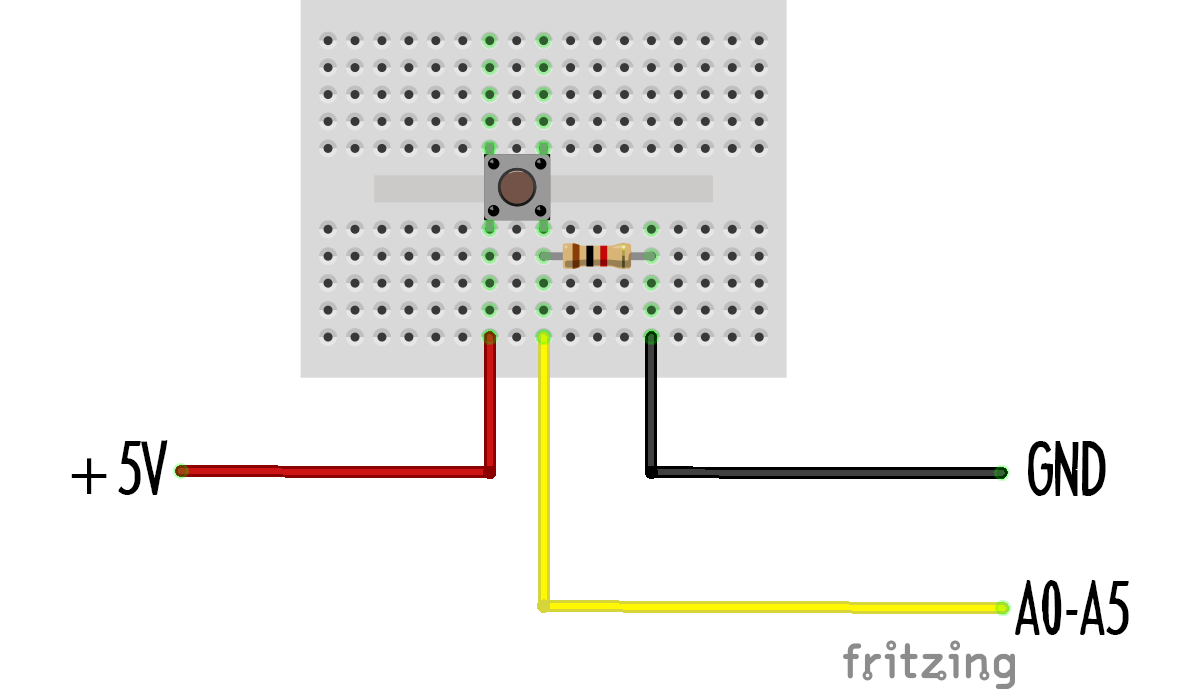
<style>
.page{position:relative;width:1184px;height:690px;background:#ffffff}
.page>*{position:absolute;margin:0}
.t1{font:67.5px "HeadlineTwoHPLHS";color:#000000}
.t2{font:67.5px "MyriadPro-Regular";color:#000000}
</style>
<div class="page">
<p class="t1" style="left:71px;top:440px;width:97px;height:55px"><span class="t2">+</span> 5V</p>
<p class="t1" style="left:1028px;top:441px;width:78px;height:55px">GND</p>
<p class="t1" style="left:1015px;top:580px;width:114px;height:55px">A0-A5</p>
</div>
